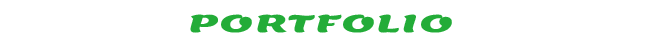
<style>
.page{position:relative;width:670px;height:45px;background:#ffffff}
.page>*{position:absolute;margin:0}
.t1{font:24px "Lemon-Regular";letter-spacing:0.05em;color:#23ac38;scale:1.75 1}
</style>
<div class="page">
<p class="t1" style="left:190px;top:14px;width:262px;height:19px">PORTFOLIO</p>
</div>
